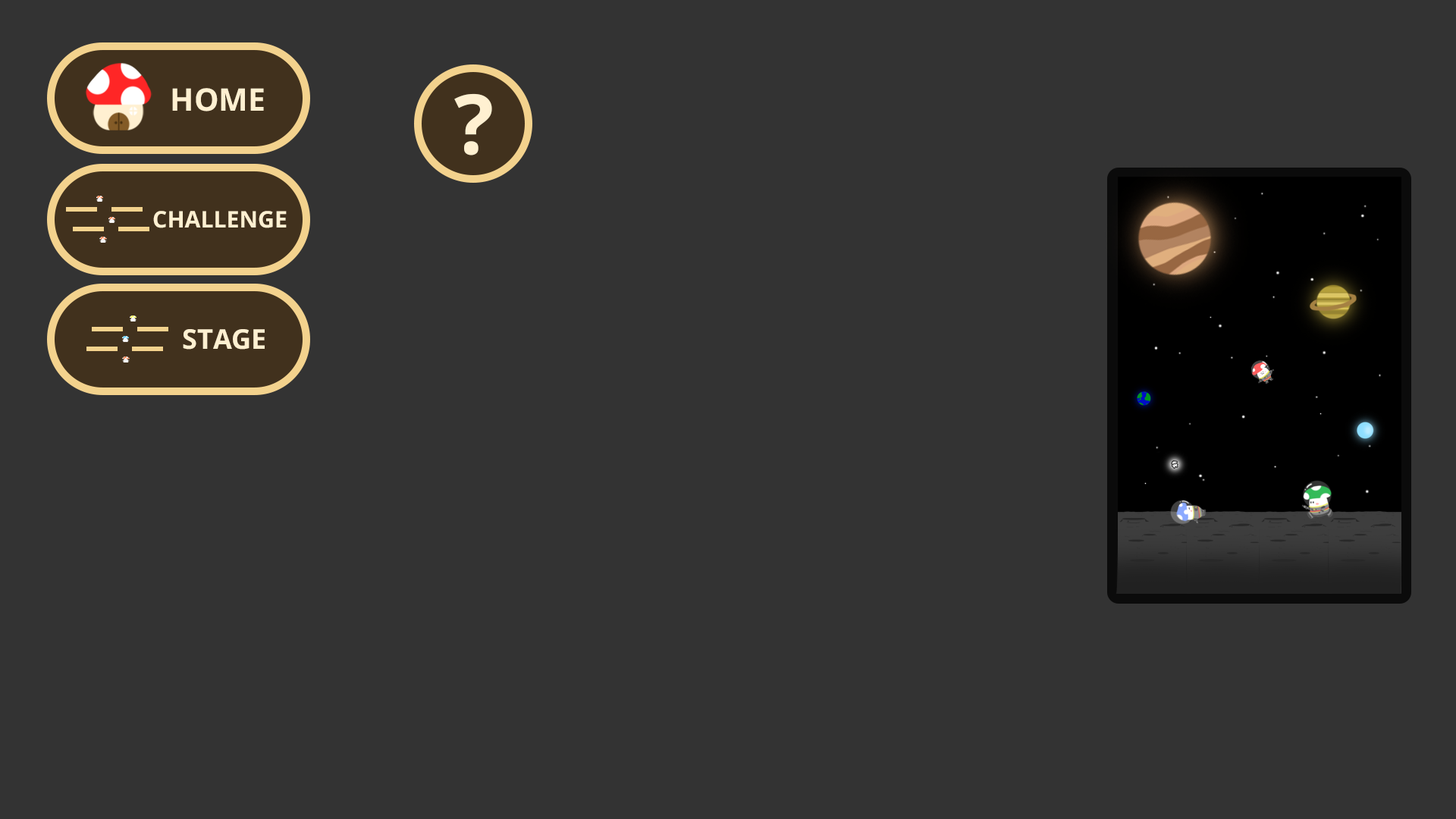
<style>
.page{position:relative;width:1456px;height:819px;background:#333333}
.page>*{position:absolute;margin:0}
.t1{font:31px "NotoSans-Bold";color:#fff0d1}
.t2{font:82.8px "NotoSans-Bold";color:#fff0d1}
.t3{font:22.9px "NotoSans-Bold";color:#fff0d1}
.t4{font:27.3px "NotoSans-Bold";color:#fff0d1}
</style>
<div class="page">
<p class="t1" style="left:172px;top:88px;width:92px;height:23px">HOME</p>
<p class="t2" style="left:454px;top:93px;width:38px;height:62px">?</p>
<p class="t3" style="left:153px;top:211px;width:134px;height:17px">CHALLENGE</p>
<p class="t4" style="left:183px;top:329px;width:82px;height:21px">STAGE</p>
</div>
